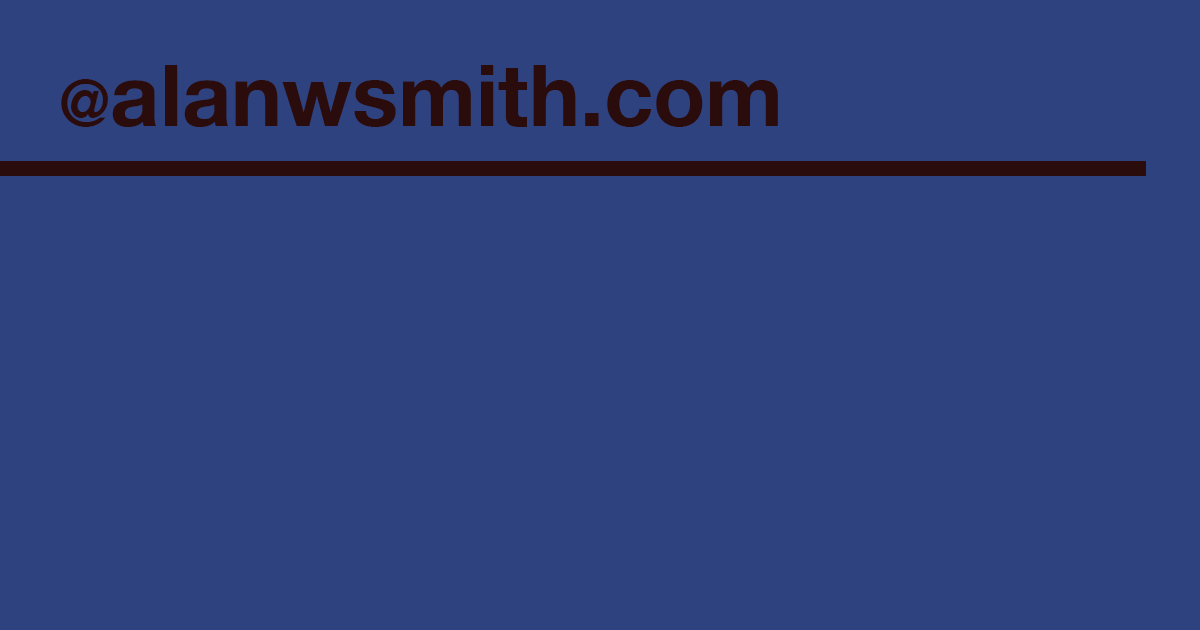
<style>
.page{position:relative;width:1200px;height:630px;background:#2f4280}
.page>*{position:absolute;margin:0}
.t1{font:86px "HelveticaNeue-Bold";color:#2b0c0c}
.t2{font:64px "HelveticaNeue-Bold";color:#2b0c0c}
</style>
<div class="page">
<p class="t1" style="left:61px;top:65px;width:717px;height:62px"><span class="t2">@</span>alanwsmith.com</p>
</div>
